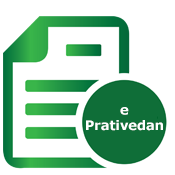
<style>
.page{position:relative;width:175px;height:175px;background:#ffffff}
.page>*{position:absolute;margin:0}
.t1{font:13px "Verdana-Bold";color:#ffffff}
</style>
<div class="page">
<p class="t1" style="left:86px;top:107px;width:77px;height:24px;text-align:center">e <br>Prativedan</p>
</div>
